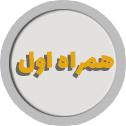
<style>
.page{position:relative;width:126px;height:126px;background:#e2e1dd}
.page>*{position:absolute;margin:0}
.t1{font:29px "Lalezar-Regular"}
.t2{font:29px "Lalezar-Regular";color:#e6a70b}
</style>
<div class="page">
<p class="t1" style="left:15px;top:54px;width:96px;height:25px">همراه اول</p>
<p class="t2" style="left:18px;top:51px;width:96px;height:25px">همراه اول</p>
</div>
